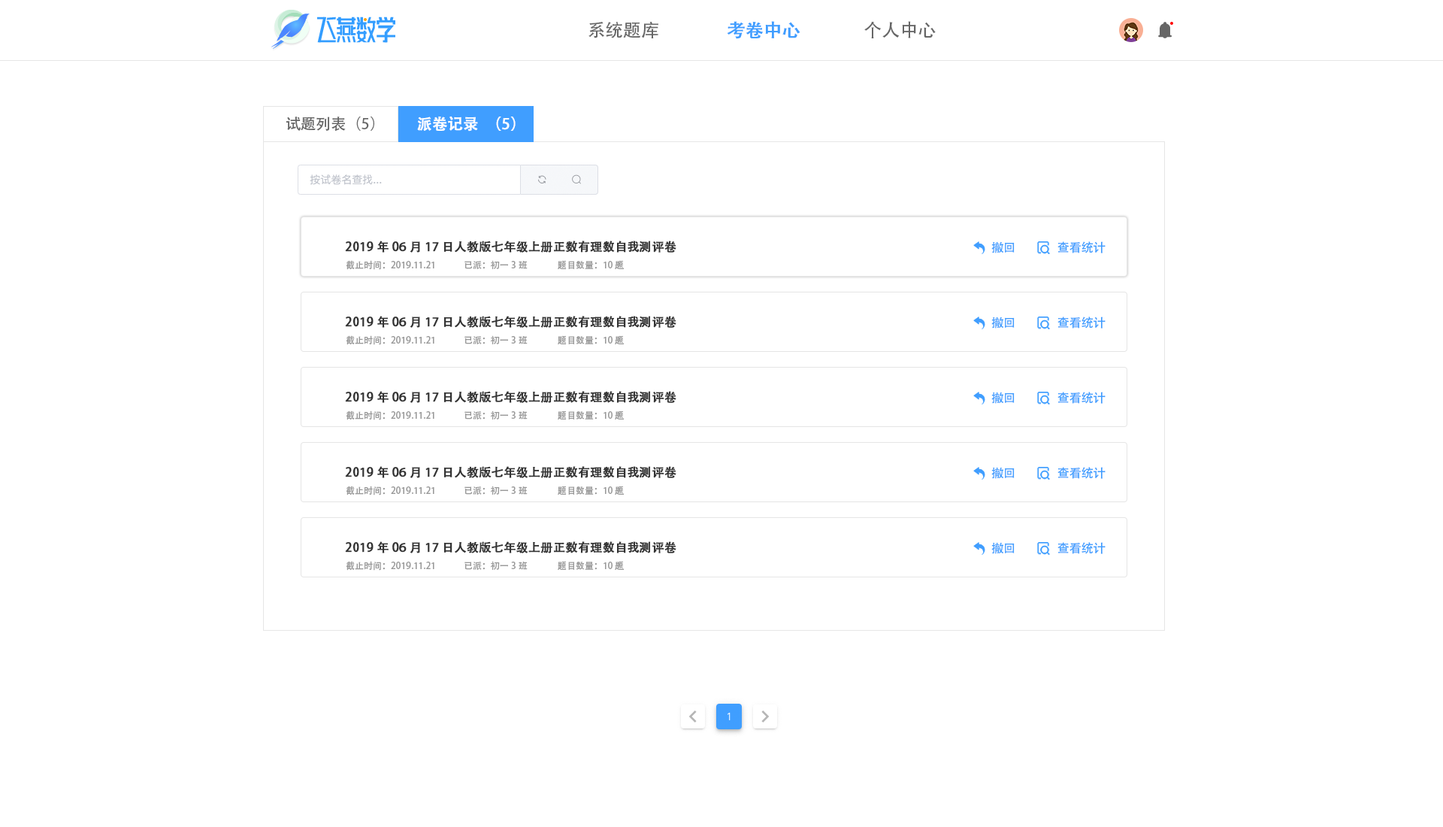
<style>
.page{position:relative;width:1443px;height:827px;background:#ffffff}
.page>*{position:absolute;margin:0}
.t1{font:18px "AdobeHeitiStd-Regular";color:#666666}
.t2{font:18px "AdobeHeitiStd-Regular";color:#409eff;font-weight:bold}
.t3{font:15px "AdobeHeitiStd-Regular";color:#666666}
.t4{font:15px "AdobeHeitiStd-Regular";color:#ffffff;font-weight:bold}
.t5{font:12px "AdobeHeitiStd-Regular";color:#333333;font-weight:bold}
.t6{font:12px "AdobeHeitiStd-Regular";color:#409eff}
.t7{font:9px "AdobeHeitiStd-Regular";color:#999999}
</style>
<div class="page">
<p class="t1" style="left:588px;top:22px;width:70px;height:16px">系统题库</p>
<p class="t2" style="left:727px;top:21px;width:73px;height:18px">考卷中心</p>
<p class="t1" style="left:864px;top:21px;width:71px;height:17px">个人中心</p>
<p class="t3" style="left:286px;top:116px;width:88px;height:15px">试题列表（5）</p>
<p class="t4" style="left:417px;top:116px;width:98px;height:15px">派卷记录（5）</p>
<p class="t5" style="left:345px;top:240px;width:331px;height:12px">2019年06月17日人教版七年级上册正数有理数自我测评卷</p>
<p class="t6" style="left:991px;top:241px;width:23px;height:12px">撤回</p>
<p class="t6" style="left:1057px;top:241px;width:48px;height:12px">查看统计</p>
<p class="t7" style="left:346px;top:260px;width:88px;height:10px">截止时间：2019.11.21</p>
<p class="t7" style="left:464px;top:260px;width:63px;height:9px">已派：初一3班</p>
<p class="t7" style="left:558px;top:260px;width:66px;height:9px">题目数量：10题</p>
<p class="t5" style="left:345px;top:316px;width:331px;height:12px">2019年06月17日人教版七年级上册正数有理数自我测评卷</p>
<p class="t6" style="left:991px;top:316px;width:23px;height:12px">撤回</p>
<p class="t6" style="left:1057px;top:316px;width:48px;height:12px">查看统计</p>
<p class="t7" style="left:346px;top:335px;width:88px;height:10px">截止时间：2019.11.21</p>
<p class="t7" style="left:464px;top:335px;width:63px;height:9px">已派：初一3班</p>
<p class="t7" style="left:558px;top:335px;width:66px;height:9px">题目数量：10题</p>
<p class="t5" style="left:345px;top:391px;width:331px;height:12px">2019年06月17日人教版七年级上册正数有理数自我测评卷</p>
<p class="t6" style="left:991px;top:391px;width:23px;height:13px">撤回</p>
<p class="t6" style="left:1057px;top:391px;width:48px;height:13px">查看统计</p>
<p class="t7" style="left:346px;top:410px;width:88px;height:10px">截止时间：2019.11.21</p>
<p class="t7" style="left:464px;top:410px;width:63px;height:9px">已派：初一3班</p>
<p class="t7" style="left:558px;top:410px;width:66px;height:9px">题目数量：10题</p>
<p class="t5" style="left:345px;top:466px;width:331px;height:12px">2019年06月17日人教版七年级上册正数有理数自我测评卷</p>
<p class="t6" style="left:991px;top:467px;width:23px;height:12px">撤回</p>
<p class="t6" style="left:1057px;top:467px;width:48px;height:12px">查看统计</p>
<p class="t7" style="left:346px;top:485px;width:88px;height:10px">截止时间：2019.11.21</p>
<p class="t7" style="left:464px;top:485px;width:63px;height:9px">已派：初一3班</p>
<p class="t7" style="left:558px;top:485px;width:66px;height:9px">题目数量：10题</p>
<p class="t5" style="left:345px;top:541px;width:331px;height:12px">2019年06月17日人教版七年级上册正数有理数自我测评卷</p>
<p class="t6" style="left:991px;top:542px;width:23px;height:12px">撤回</p>
<p class="t6" style="left:1057px;top:542px;width:48px;height:12px">查看统计</p>
<p class="t7" style="left:346px;top:561px;width:88px;height:9px">截止时间：2019.11.21</p>
<p class="t7" style="left:464px;top:561px;width:63px;height:9px">已派：初一3班</p>
<p class="t7" style="left:558px;top:561px;width:66px;height:9px">题目数量：10题</p>
</div>
